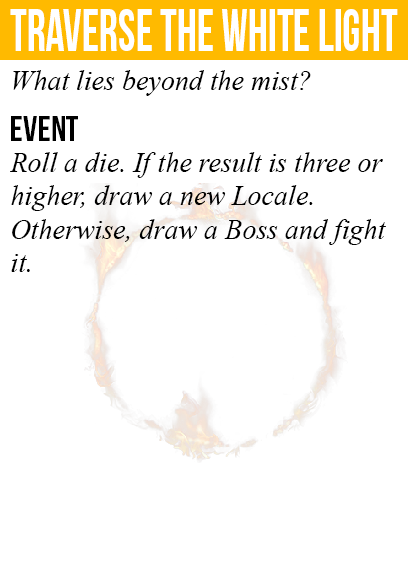
<style>
.page{position:relative;width:408px;height:585px;background:#ffffff}
.page>*{position:absolute;margin:0}
.t1{font:60px "BebasNeue";color:#ffffff;scale:0.78 1}
.t2{font:28px "TimesNewRomanPS-ItalicMT";color:#000000}
.t3{font:36px "BebasNeue";color:#000000}
</style>
<div class="page">
<p class="t1" style="left:10px;top:9px;width:388px;height:42px">traverse the white light</p>
<p class="t2" style="left:13px;top:70px;width:298px;height:26px">What lies beyond the mist?</p>
<p class="t3" style="left:11px;top:116px;width:67px;height:25px">event</p>
<p class="t2" style="left:10px;top:152px;width:376px;height:120px">Roll a die. If the result is three or<br>higher, draw a new Locale.<br>Otherwise, draw a Boss and fight<br>it.</p>
</div>
